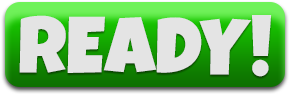
<style>
.page{position:relative;width:291px;height:95px;background:#e4e4e4}
.page>*{position:absolute;margin:0}
.t1{font:80px "LuckiestGuy-Regular";color:#e4e4e4;text-transform:uppercase}
</style>
<div class="page">
<p class="t1" style="left:19px;top:15px;width:253px;height:62px">ready!</p>
</div>
